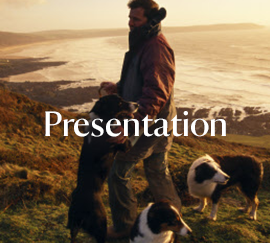
<style>
.page{position:relative;width:270px;height:243px}
.page>*{position:absolute;margin:0}
.t1{font:35.7px "NationalTrustDisplayTT-Regular";color:#ffffff}
</style>
<div class="page">
<p class="t1" style="left:45px;top:111px;width:181px;height:26px">Presentation</p>
</div>
